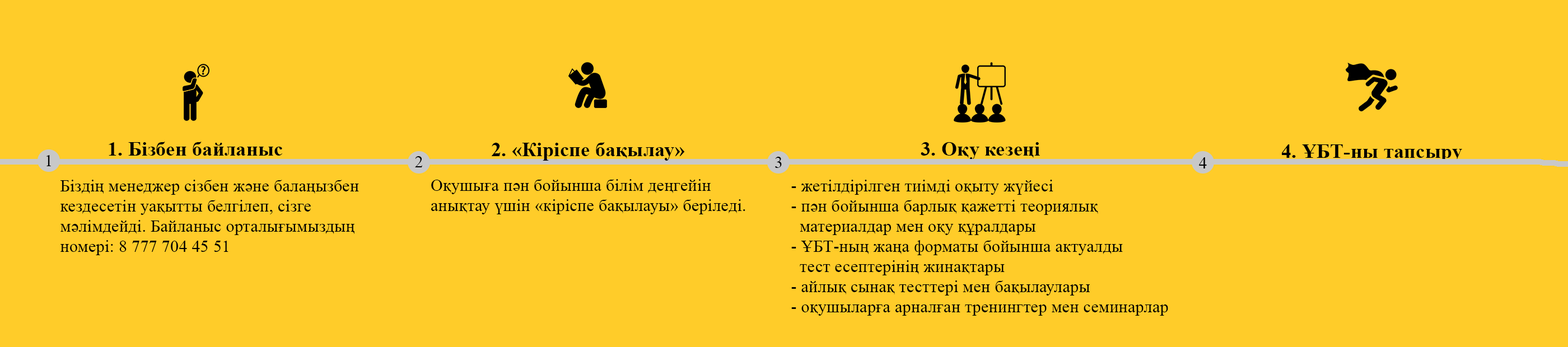
<style>
.page{position:relative;width:1568px;height:347px;background:#ffcc29}
.page>*{position:absolute;margin:0}
.t1{font:20.2px "TimesNewRomanPS-BoldMT";letter-spacing:0.01em;color:#000000}
.t2{font:16.8px "TimesNewRomanPSMT";letter-spacing:0.01em;color:#000000}
</style>
<div class="page">
<p class="t1" style="left:109px;top:142px;width:173px;height:14px">1. Бізбен байланыс</p>
<p class="t1" style="left:491px;top:142px;width:194px;height:19px">2. «Кіріспе бақылау»</p>
<p class="t1" style="left:921px;top:142px;width:119px;height:18px">3. Оқу кезеңі</p>
<p class="t1" style="left:1282px;top:144px;width:180px;height:18px">4. ҰБТ-ны тапсыру</p>
<p class="t2" style="left:46px;top:155px;width:5px;height:11px">1</p>
<p class="t2" style="left:415px;top:156px;width:8px;height:11px">2</p>
<p class="t2" style="left:775px;top:157px;width:7px;height:11px">3</p>
<p class="t2" style="left:1199px;top:157px;width:8px;height:12px">4</p>
<p class="t2" style="left:60px;top:180px;width:299px;height:75px">Біздің менеджер сізбен және балаңызбен <br>кездесетін уақытты белгілеп, сізге <br>мәлімдейді. Байланыс орталығымыздың <br>номері: 8 777 704 45 51</p>
<p class="t2" style="left:431px;top:179px;width:314px;height:35px">Оқушыға пән бойынша білім деңгейін <br>анықтау үшін «кіріспе бақылауы» беріледі.</p>
<p class="t2" style="left:791px;top:180px;width:377px;height:136px">- жетілдірілген тиімді оқыту жүйесі<br>- пән бойынша барлық қажетті теориялық <br>  материалдар мен оқу құралдары<br>- ҰБТ-ның жаңа форматы бойынша актуалды <br>  тест есептерінің жинақтары<br>- айлық сынақ тесттері мен бақылаулары<br>- оқушыларға арналған тренингтер мен семинарлар</p>
</div>
